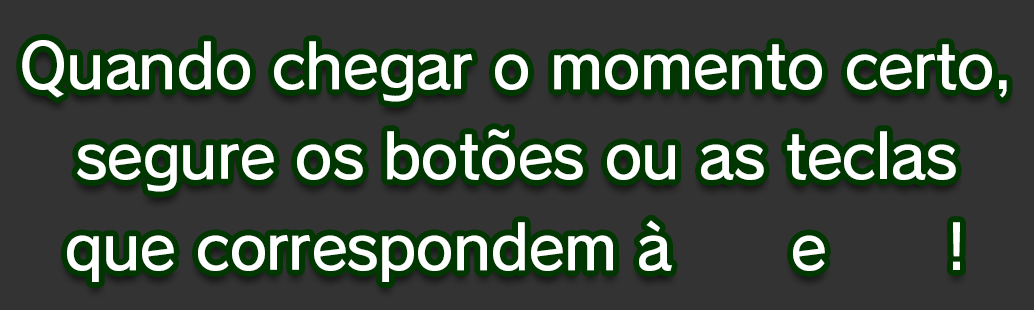
<style>
.page{position:relative;width:1034px;height:310px;background:#333333}
.page>*{position:absolute;margin:0}
.t1{font:61.3px/90.7px "RodinPro-DB";letter-spacing:-0.022em;color:#ffffff}
</style>
<div class="page">
<p class="t1" style="left:22px;top:40px;width:985px;height:242px;text-align:center">Quando chegar o momento certo,<br>segure os botões ou as teclas<br>que correspondem à      e      !</p>
</div>
